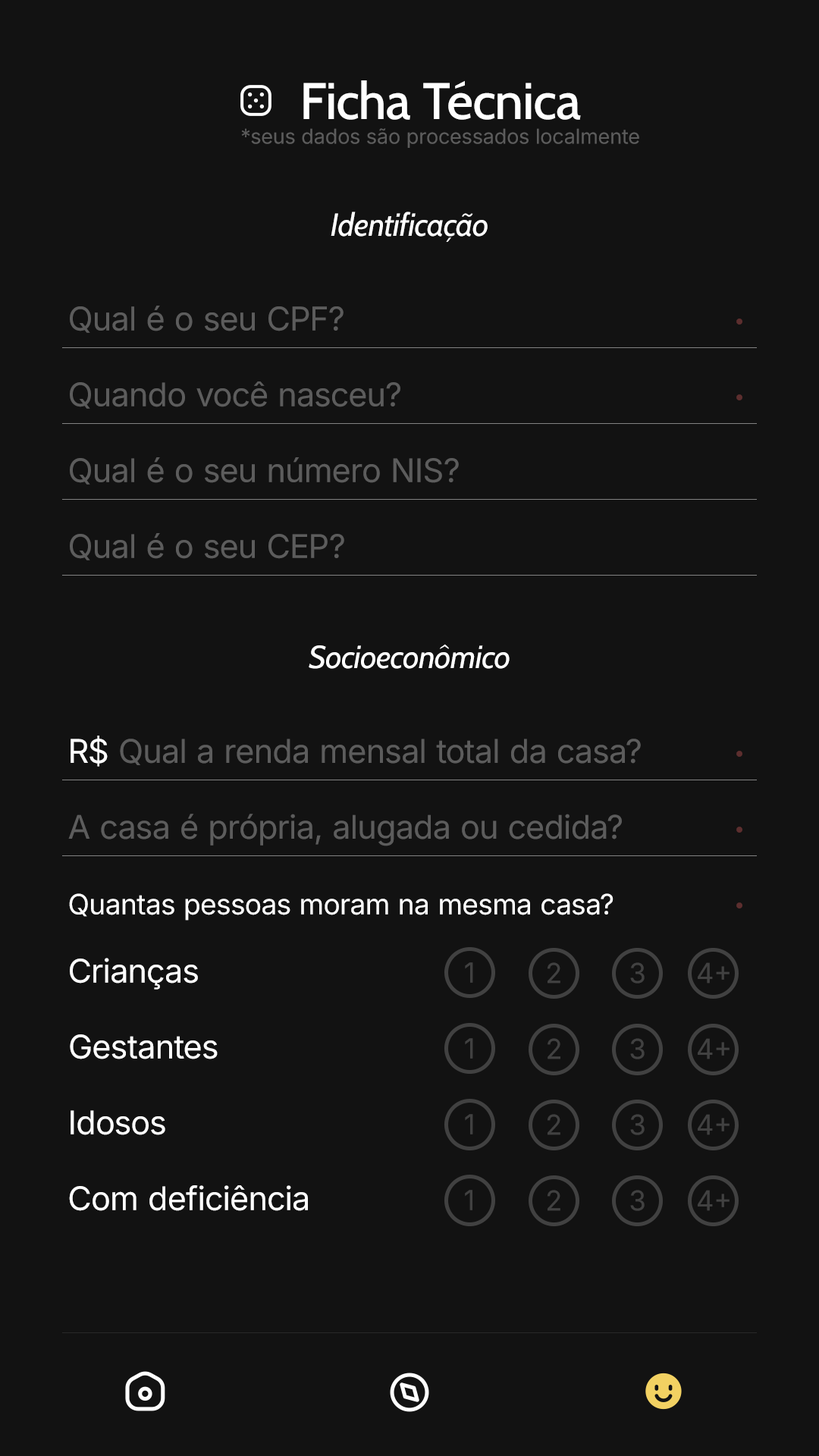
<style>
.page{position:relative;width:819px;height:1456px;background:#121212}
.page>*{position:absolute;margin:0}
.t1{font:20.5px "Inter-Regular";color:#5c5c5c}
.t2{font:51.6px "Cabin-Medium";color:#ffffff}
.t3{font:31.8px "Cabin-Italic";color:#ffffff}
.t4{font:32.7px "Inter-Regular";color:#5c5c5c}
.t5{font:19px "Inter-Regular";color:#5c2e2e}
.t6{font:32.6px "Inter-Regular";color:#5c5c5c}
.t7{font:18.9px "Inter-Regular";color:#5c2e2e}
.t8{font:32.7px "Inter-Regular";color:#ffffff}
.t9{font:28px "Inter-Regular";color:#ffffff}
.t10{font:32.6px "Inter-Regular";color:#ffffff}
.t11{font:27.5px "Inter-Regular";color:#414141}
</style>
<div class="page">
<p class="t1" style="left:241px;top:80px;width:398px;height:68px;text-align:center"><span class="t2">Ficha Técnica<br></span>*seus dados são processados localmente</p>
<p class="t3" style="left:331px;top:212px;width:157px;height:30px">Identificação</p>
<p class="t4" style="left:70px;top:306px;width:274px;height:27px">Qual é o seu CPF?</p>
<p class="t5" style="left:736px;top:318px;width:6px;height:7px">•</p>
<p class="t6" style="left:70px;top:381px;width:330px;height:28px">Quando você nasceu?</p>
<p class="t7" style="left:736px;top:394px;width:6px;height:6px">•</p>
<p class="t6" style="left:70px;top:457px;width:389px;height:28px">Qual é o seu número NIS?</p>
<p class="t6" style="left:70px;top:533px;width:274px;height:27px">Qual é o seu CEP?</p>
<p class="t3" style="left:309px;top:644px;width:201px;height:25px">Socioeconômico</p>
<p class="t4" style="left:71px;top:736px;width:570px;height:31px">R$ Qual a renda mensal total da casa?</p>
<p class="t8" style="left:71px;top:736px;width:37px;height:31px">R$</p>
<p class="t7" style="left:736px;top:751px;width:6px;height:6px">•</p>
<p class="t6" style="left:68px;top:814px;width:554px;height:32px">A casa é própria, alugada ou cedida?</p>
<p class="t7" style="left:736px;top:827px;width:6px;height:6px">•</p>
<p class="t9" style="left:69px;top:893px;width:544px;height:28px">Quantas pessoas moram na mesma casa?</p>
<p class="t7" style="left:736px;top:902px;width:6px;height:6px">•</p>
<p class="t10" style="left:70px;top:958px;width:128px;height:32px">Crianças</p>
<p class="t11" style="left:465px;top:962px;width:8px;height:21px">1</p>
<p class="t11" style="left:548px;top:962px;width:12px;height:22px">2</p>
<p class="t11" style="left:630px;top:962px;width:15px;height:22px">3</p>
<p class="t11" style="left:698px;top:962px;width:32px;height:22px">4+</p>
<p class="t10" style="left:70px;top:1034px;width:148px;height:25px">Gestantes</p>
<p class="t11" style="left:465px;top:1038px;width:8px;height:21px">1</p>
<p class="t11" style="left:548px;top:1038px;width:12px;height:21px">2</p>
<p class="t11" style="left:630px;top:1038px;width:15px;height:21px">3</p>
<p class="t11" style="left:698px;top:1038px;width:32px;height:21px">4+</p>
<p class="t10" style="left:71px;top:1110px;width:94px;height:25px">Idosos</p>
<p class="t11" style="left:465px;top:1114px;width:8px;height:20px">1</p>
<p class="t11" style="left:548px;top:1114px;width:12px;height:21px">2</p>
<p class="t11" style="left:630px;top:1114px;width:15px;height:21px">3</p>
<p class="t11" style="left:698px;top:1114px;width:32px;height:21px">4+</p>
<p class="t10" style="left:69px;top:1185px;width:239px;height:26px">Com deficiência</p>
<p class="t11" style="left:465px;top:1190px;width:7px;height:20px">1</p>
<p class="t11" style="left:548px;top:1190px;width:12px;height:21px">2</p>
<p class="t11" style="left:630px;top:1190px;width:15px;height:21px">3</p>
<p class="t11" style="left:698px;top:1190px;width:32px;height:21px">4+</p>
</div>
